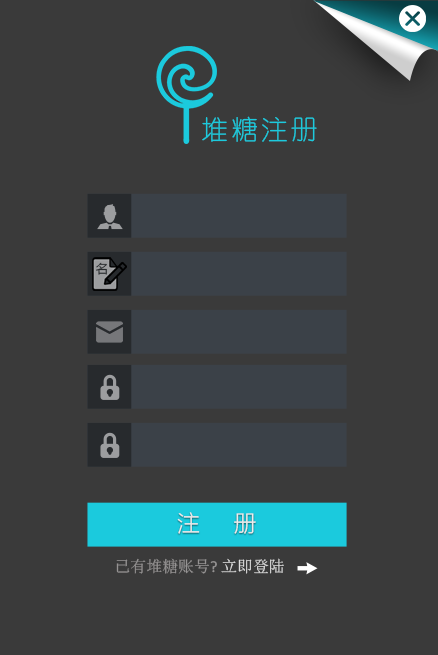
<style>
.page{position:relative;width:438px;height:655px;background:#3a3a3a}
.page>*{position:absolute;margin:0}
.t1{font:26.8px "YouYuan";letter-spacing:0.1em;color:#1ccadd}
.t2{font:22.8px "MicrosoftYaHeiLight";color:#eeeeee}
.t3{font:16px "SimSun";color:#959393}
.t4{font:16px "Calibri";color:#959393}
.t5{font:16px "SimSun";color:#dfdfdf}
</style>
<div class="page">
<p class="t1" style="left:202px;top:116px;width:115px;height:26px">堆糖注册</p>
<p class="t2" style="left:177px;top:512px;width:79px;height:22px">注     册</p>
<p class="t3" style="left:116px;top:558px;width:168px;height:16px">已有堆糖账号<span class="t4">? </span><span class="t5">立即登陆</span></p>
</div>
